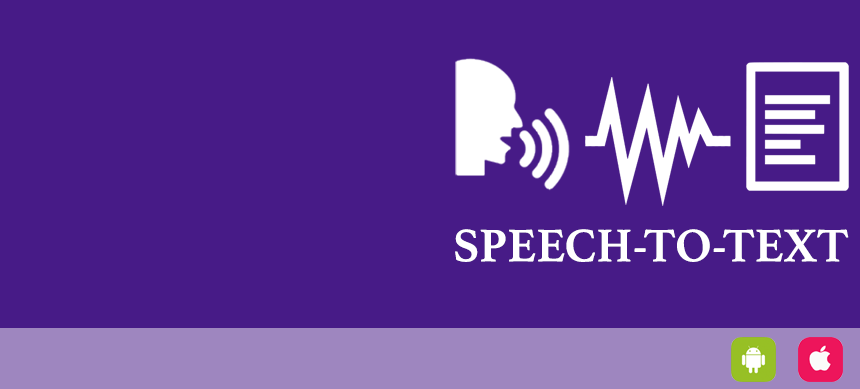
<style>
.page{position:relative;width:860px;height:389px;background:#471b87}
.page>*{position:absolute;margin:0}
.t1{font:48px "Athelas-Bold";color:#ffffff}
</style>
<div class="page">
<p class="t1" style="left:455px;top:229px;width:394px;height:33px">SPEECH-TO-TEXT</p>
</div>
